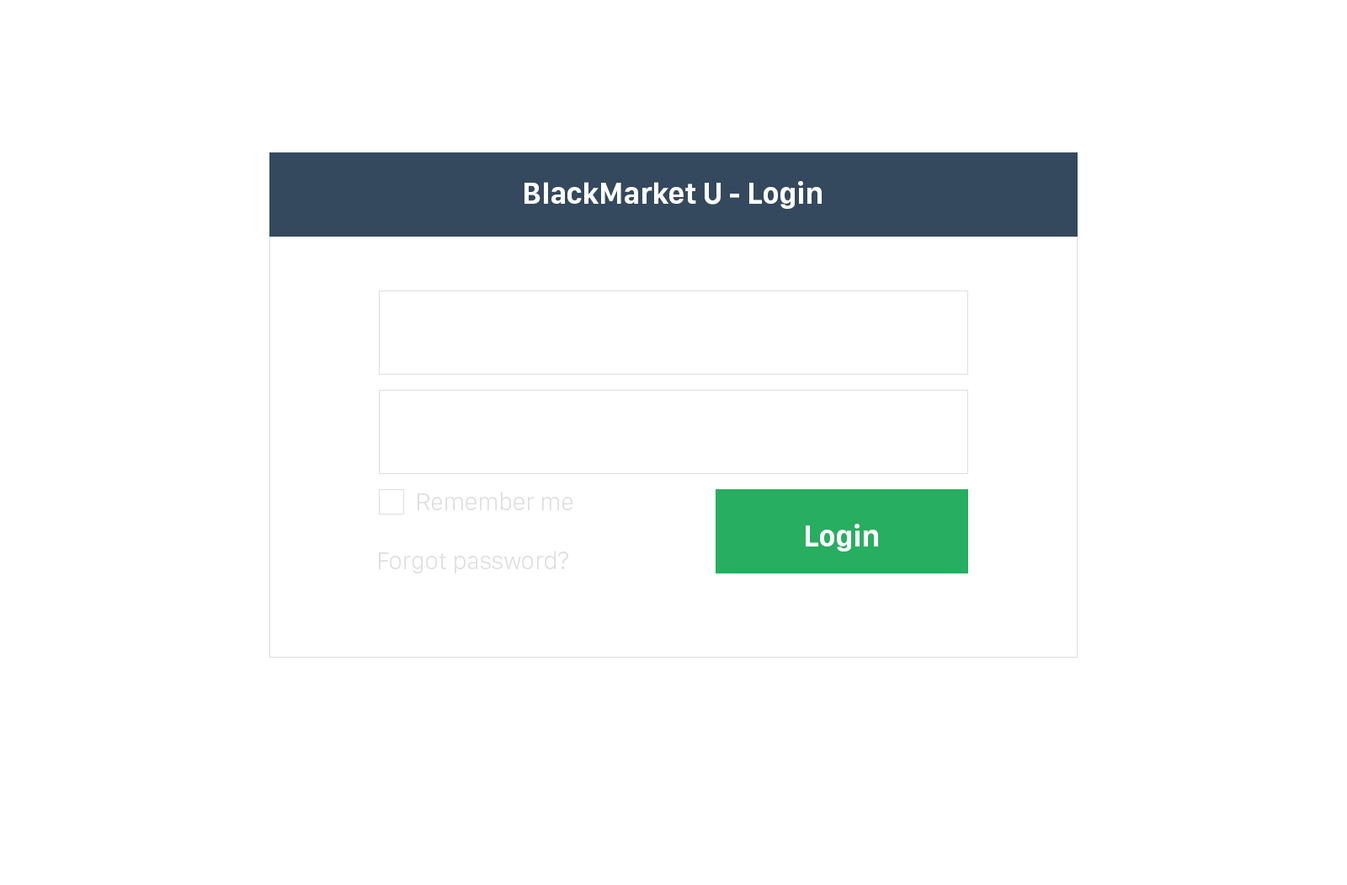
<style>
.page{position:relative;width:1347px;height:885px;background:#ffffff}
.page>*{position:absolute;margin:0}
.t1{font:30.3px "SanFranciscoText-Bold";letter-spacing:-0.02em;color:#ffffff}
.t2{font:25.3px "SanFranciscoText-Light";letter-spacing:-0.02em;color:#dedede}
</style>
<div class="page">
<p class="t1" style="left:525px;top:181px;width:297px;height:28px">BlackMarket U - Login</p>
<p class="t2" style="left:418px;top:492px;width:155px;height:18px">Remember me</p>
<p class="t1" style="left:806px;top:524px;width:72px;height:28px">Login</p>
<p class="t2" style="left:379px;top:551px;width:189px;height:22px">Forgot password?</p>
</div>
